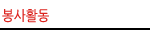
<style>
.page{position:relative;width:150px;height:30px;background:#ffffff}
.page>*{position:absolute;margin:0}
.t1{font:14px "NanumGothic";color:#dc241f;scale:0.9 1}
</style>
<div class="page">
<p class="t1" style="left:2px;top:9px;width:47px;height:14px">봉사활동</p>
</div>
